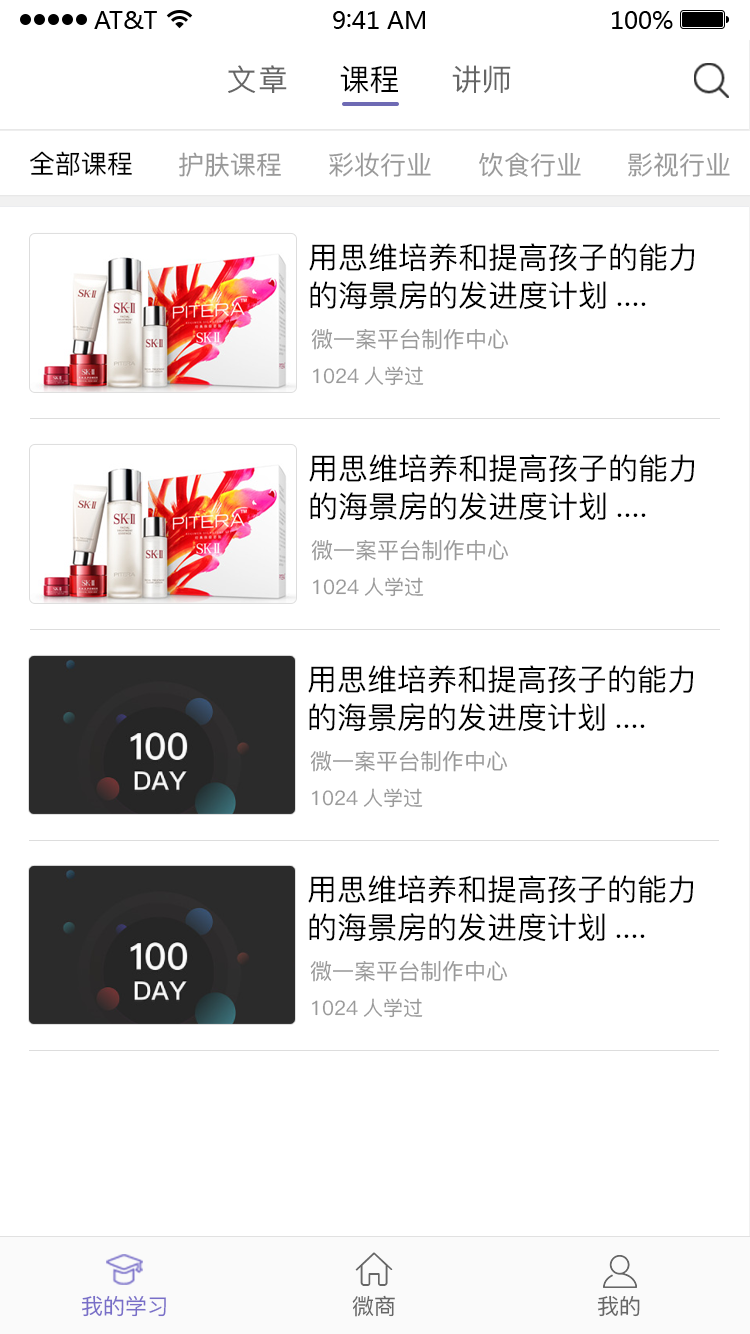
<style>
.page{position:relative;width:750px;height:1334px;background:#ffffff}
.page>*{position:absolute;margin:0}
.t1{font:30px "PingFang-SC-Medium";letter-spacing:0.04em;color:#666666}
.t2{font:30px "PingFang-SC-Medium";color:#000000}
.t3{font:30px "PingFang-SC-Medium";color:#666666}
.t4{font:26px "PingFang-SC-Medium";color:#000000}
.t5{font:26px "PingFang-SC-Medium";color:#999999}
.t6{font:30px/38px "PingFang-SC-Medium";color:#000000}
.t7{font:22px "PingFang-SC-Medium";color:#999999}
.t8{font:20px "PingFang-SC-Medium";color:#999999}
.t9{font:22px "PingFang-SC-Medium";color:#786ec8}
.t10{font:22px "PingFang-SC-Medium";color:#666666}
</style>
<div class="page">
<p class="t1" style="left:228px;top:65px;width:59px;height:28px">文章</p>
<p class="t2" style="left:340px;top:65px;width:58px;height:28px">课程</p>
<p class="t3" style="left:452px;top:65px;width:59px;height:28px">讲师</p>
<p class="t4" style="left:30px;top:151px;width:102px;height:25px">全部课程</p>
<p class="t5" style="left:179px;top:152px;width:102px;height:25px">护肤课程</p>
<p class="t5" style="left:329px;top:152px;width:102px;height:25px">彩妆行业</p>
<p class="t5" style="left:479px;top:152px;width:102px;height:25px">饮食行业</p>
<p class="t5" style="left:628px;top:152px;width:102px;height:25px">影视行业</p>
<p class="t6" style="left:309px;top:243px;width:386px;height:66px">用思维培养和提高孩子的能力<br>的海景房的发进度计划....</p>
<p class="t7" style="left:311px;top:328px;width:198px;height:22px">微一案平台制作中心</p>
<p class="t8" style="left:313px;top:366px;width:111px;height:20px">1024人学过</p>
<p class="t6" style="left:309px;top:454px;width:386px;height:66px">用思维培养和提高孩子的能力<br>的海景房的发进度计划....</p>
<p class="t7" style="left:311px;top:539px;width:198px;height:22px">微一案平台制作中心</p>
<p class="t8" style="left:313px;top:577px;width:111px;height:20px">1024人学过</p>
<p class="t6" style="left:308px;top:665px;width:386px;height:66px">用思维培养和提高孩子的能力<br>的海景房的发进度计划....</p>
<p class="t7" style="left:310px;top:750px;width:198px;height:22px">微一案平台制作中心</p>
<p class="t8" style="left:312px;top:788px;width:111px;height:20px">1024人学过</p>
<p class="t6" style="left:308px;top:875px;width:386px;height:66px">用思维培养和提高孩子的能力<br>的海景房的发进度计划....</p>
<p class="t7" style="left:310px;top:960px;width:198px;height:22px">微一案平台制作中心</p>
<p class="t8" style="left:312px;top:998px;width:111px;height:20px">1024人学过</p>
<p class="t9" style="left:81px;top:1295px;width:85px;height:22px">我的学习</p>
<p class="t10" style="left:352px;top:1295px;width:43px;height:22px">微商</p>
<p class="t10" style="left:597px;top:1295px;width:43px;height:22px">我的</p>
</div>
